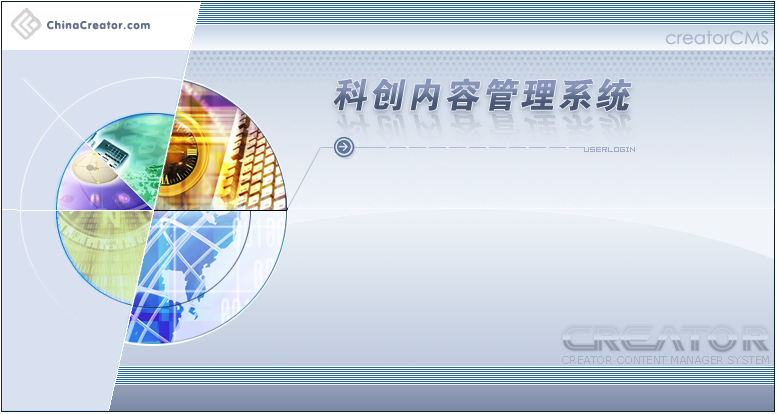
<style>
.page{position:relative;width:777px;height:414px}
.page>*{position:absolute;margin:0}
.t1{font:11px "FZY4JW--GB1-0";letter-spacing:0.1em;color:#606e8a}
.t2{font:18px "CenturyGothic";color:#aab7c8}
.t3{font:35px "FZDHTJW--GB1-0";letter-spacing:0.075em;font-style:italic}
.t4{font:6px "04b08";color:#a1adc1}
.t5{font:11px "Verdana";letter-spacing:-0.05em;color:#a7b1c5}
</style>
<div class="page">
<p class="t1" style="left:47px;top:20px;width:103px;height:10px">ChinaCreator.com</p>
<p class="t2" style="left:665px;top:30px;width:104px;height:15px">creatorCMS</p>
<p class="t3" style="left:333px;top:78px;width:299px;height:33px">科创内容管理系统</p>
<p class="t4" style="left:584px;top:147px;width:51px;height:5px">UserLogin</p>
<p class="t5" style="left:562px;top:356px;width:207px;height:8px">CREATOR CONTENT MANAGER SYSTEM</p>
</div>
